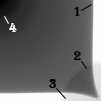
<style>
.page{position:relative;width:101px;height:101px}
.page>*{position:absolute;margin:0}
.t1{font:13.3px "Algerian";color:#000000}
.t2{font:13.3px "Algerian";color:#ffffff}
</style>
<div class="page">
<p class="t1" style="left:74px;top:7px;width:6px;height:9px">1</p>
<p class="t2" style="left:9px;top:23px;width:8px;height:9px">4</p>
<p class="t1" style="left:73px;top:51px;width:8px;height:10px">2</p>
<p class="t1" style="left:49px;top:79px;width:7px;height:9px">3</p>
</div>
